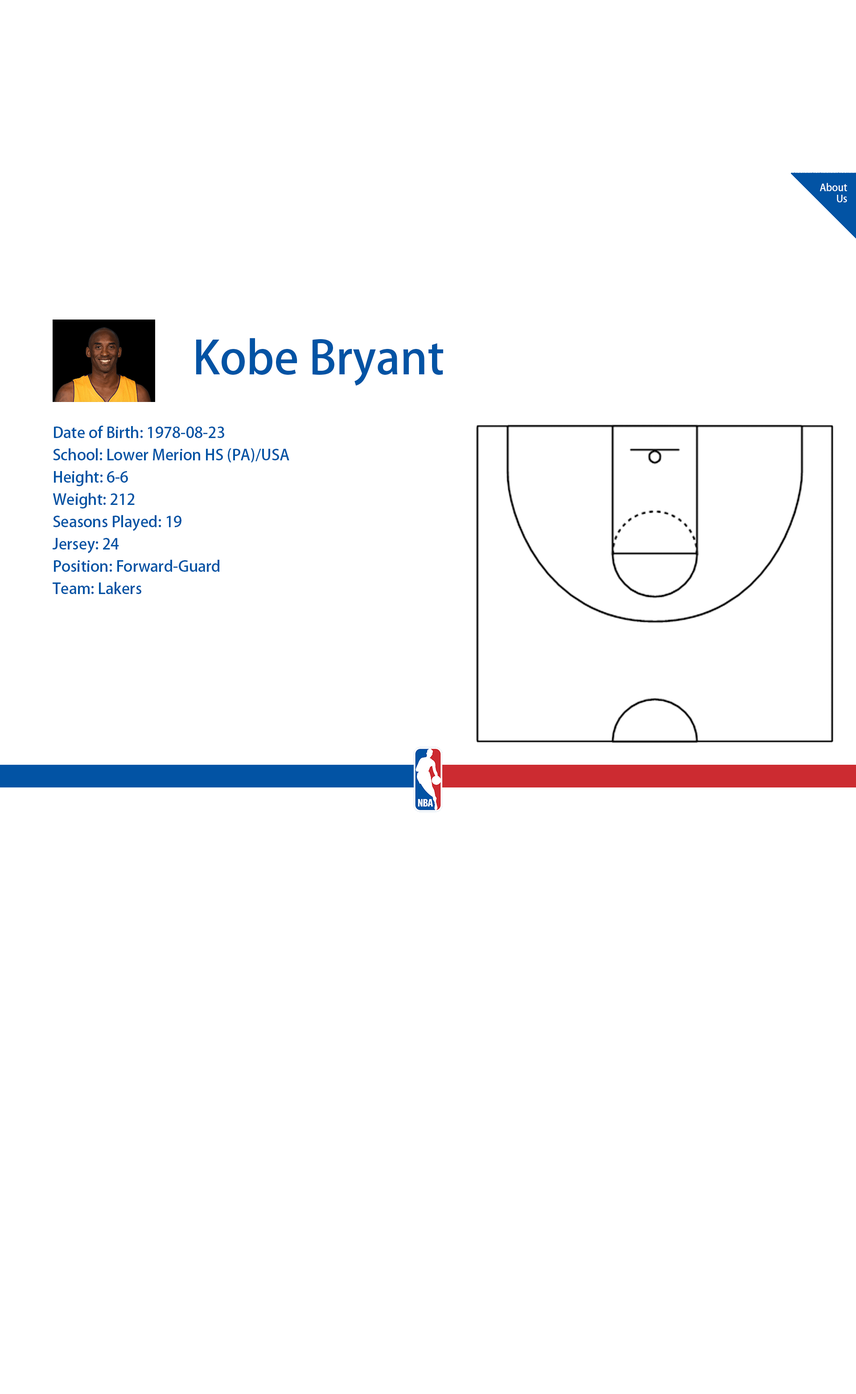
<style>
.page{position:relative;width:856px;height:1394px;background:#ffffff}
.page>*{position:absolute;margin:0}
.t1{font:9.8px/11.1px "AdobeHeitiStd-Regular";color:#ffffff}
.t2{font:45.2px "AdobeHeitiStd-Regular";color:#0253a4}
.t3{font:15.1px/22.3px "AdobeHeitiStd-Regular";color:#0253a4}
</style>
<div class="page">
<p class="t1" style="left:819px;top:183px;width:28px;height:19px;text-align:right">About<br>Us</p>
<p class="t2" style="left:196px;top:338px;width:247px;height:48px">Kobe Bryant</p>
<p class="t3" style="left:52px;top:426px;width:237px;height:168px">Date of Birth: 1978-08-23<br>School: Lower Merion HS (PA)/USA<br>Height: 6-6<br>Weight: 212<br>Seasons Played: 19<br>Jersey: 24<br>Position: Forward-Guard<br>Team: Lakers</p>
</div>
